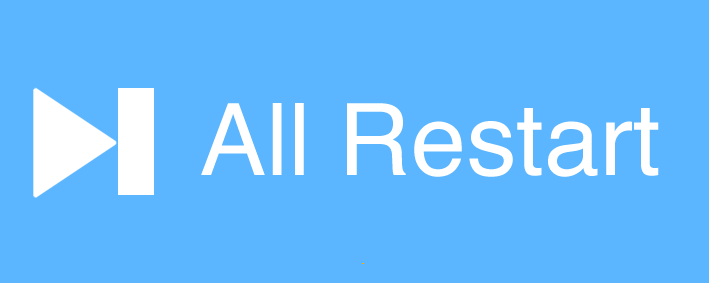
<style>
.page{position:relative;width:709px;height:283px;background:#5cb6ff}
.page>*{position:absolute;margin:0}
.t1{font:100px "Helvetica";color:#ffffff}
</style>
<div class="page">
<p class="t1" style="left:201px;top:103px;width:458px;height:74px">All Restart</p>
</div>
